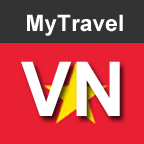
<style>
.page{position:relative;width:144px;height:144px;background:#e91f33}
.page>*{position:absolute;margin:0}
.t1{font:22.7px "Arial-BoldMT";color:#ffffff}
.t2{font:75.8px "Arial-BoldMT";color:#ffffff}
</style>
<div class="page">
<p class="t1" style="left:27px;top:14px;width:96px;height:22px">MyTravel</p>
<p class="t2" style="left:21px;top:61px;width:99px;height:55px">VN</p>
</div>
